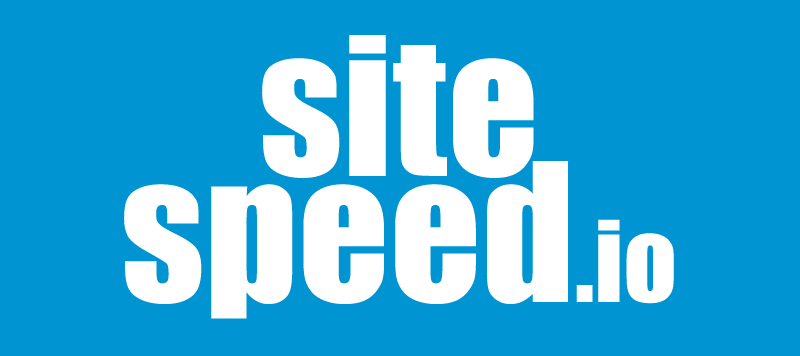
<style>
.page{position:relative;width:800px;height:356px;background:#0095d2}
.page>*{position:absolute;margin:0}
.t1{font:178px/126.1px "Impact";letter-spacing:0.005em;color:#ffffff}
.t2{font:103.8px/126.1px "Impact";letter-spacing:0.005em;color:#ffffff}
</style>
<div class="page">
<p class="t1" style="left:124px;top:35px;width:550px;height:284px;text-align:center">site<br>speed<span class="t2">.io</span></p>
</div>
